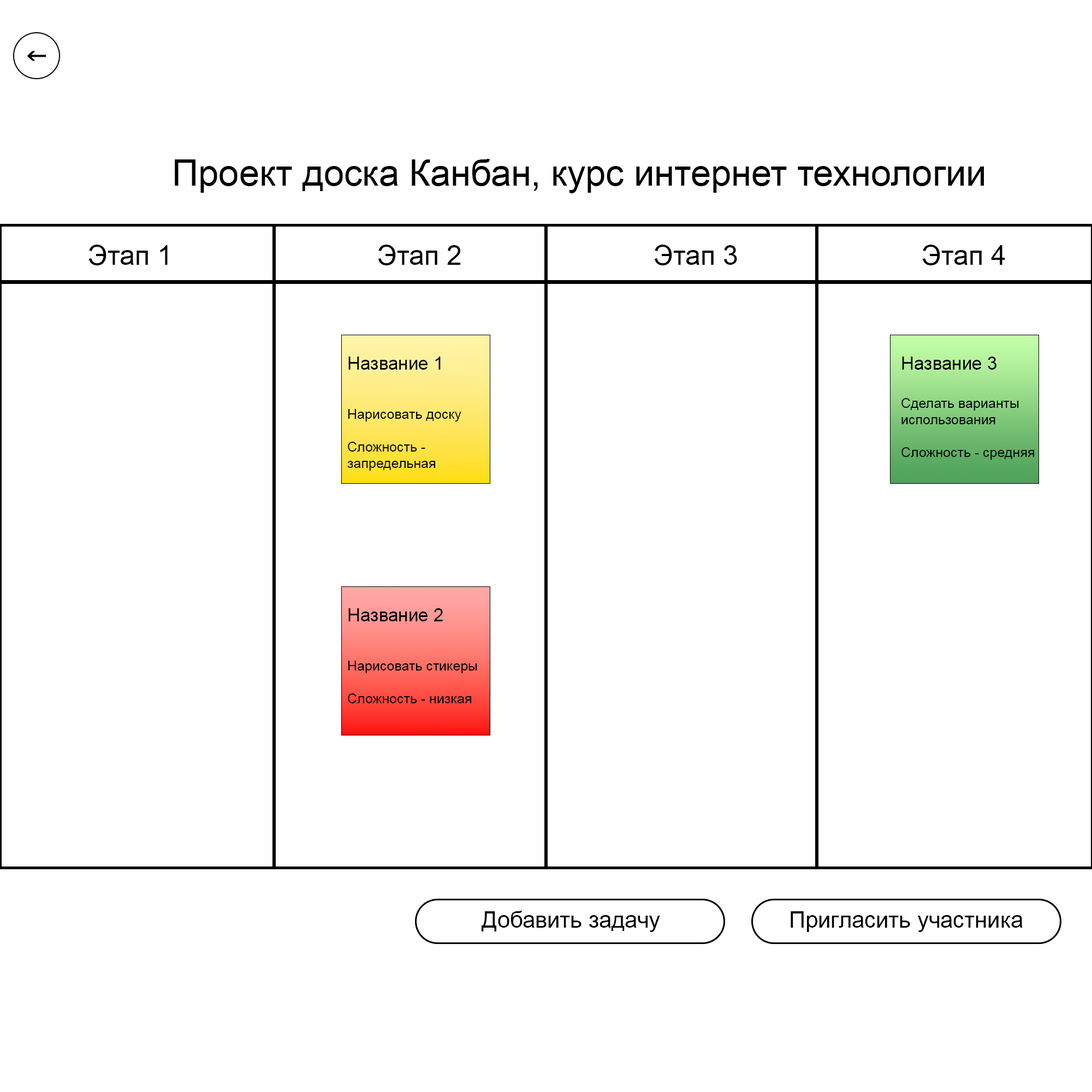
<style>
.page{position:relative;width:1092px;height:1092px;background:#ffffff}
.page>*{position:absolute;margin:0}
.t1{font:36.4px "ArialMT";color:#000000}
.t2{font:27.3px "ArialMT";color:#000000}
.t3{font:13.6px "ArialMT";color:#000000}
.t4{font:18.2px "ArialMT";color:#000000}
.t5{font:22.7px "ArialMT";color:#000000}
</style>
<div class="page">
<p class="t1" style="left:175px;top:159px;width:809px;height:34px">Проект доска Канбан, курс интернет технологии</p>
<p class="t2" style="left:88px;top:245px;width:80px;height:20px">Этап 1</p>
<p class="t2" style="left:378px;top:245px;width:83px;height:20px">Этап 2</p>
<p class="t2" style="left:654px;top:245px;width:83px;height:20px">Этап 3</p>
<p class="t2" style="left:922px;top:245px;width:83px;height:20px">Этап 4</p>
<p class="t3" style="left:347px;top:357px;width:114px;height:114px"><span class="t4"><br>Название 1<br></span><br><br>Нарисовать доску<br><br>Сложность - запредельная</p>
<p class="t3" style="left:901px;top:357px;width:133px;height:103px"><span class="t4"><br>Название 3<br><br></span>Сделать варианты использования<br><br>Сложность - средняя</p>
<p class="t3" style="left:348px;top:608px;width:129px;height:95px"><span class="t4"><br>Название 2<br></span><br><br>Нарисовать стикеры<br><br>Сложность - низкая</p>
<p class="t5" style="left:482px;top:911px;width:178px;height:21px">Добавить задачу</p>
<p class="t5" style="left:791px;top:911px;width:232px;height:21px">Пригласить участника</p>
</div>
